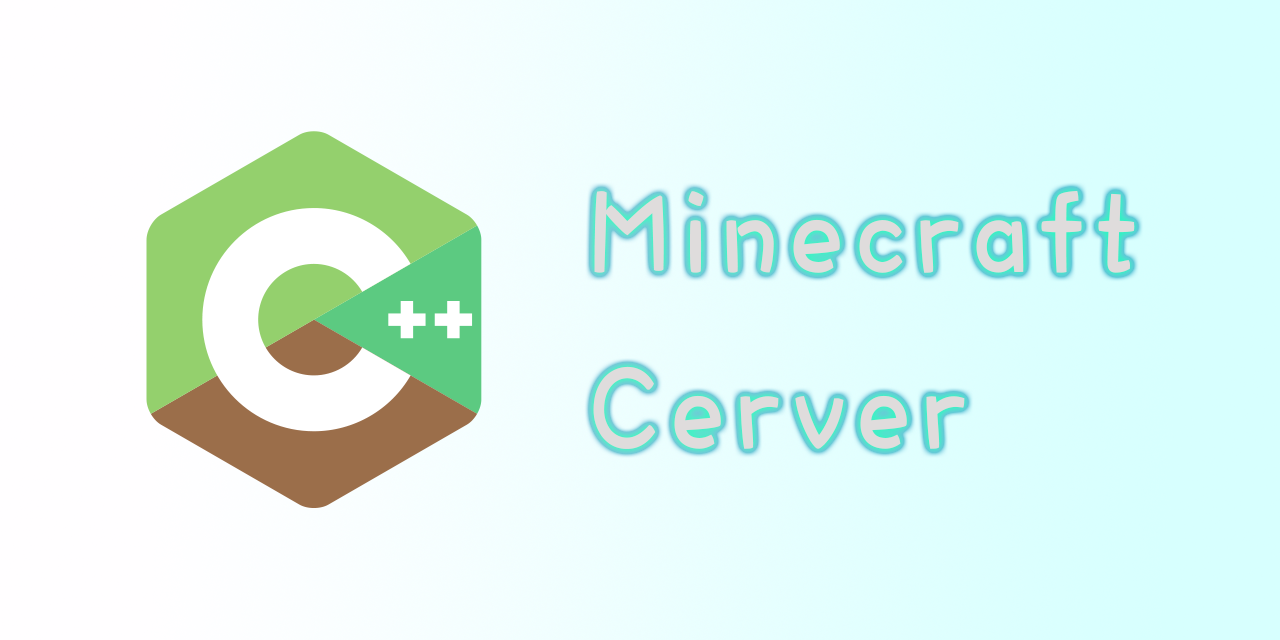
<style>
.page{position:relative;width:1280px;height:640px}
.page>*{position:absolute;margin:0}
.t1{font:117.2px/176px "DFWaWaSC-W5";letter-spacing:0.13em;color:#dfdcdc;font-weight:bold;scale:0.86 1}
</style>
<div class="page">
<p class="t1" style="left:593px;top:190px;width:542px;height:259px">Minecraft <br>Cerver</p>
</div>
